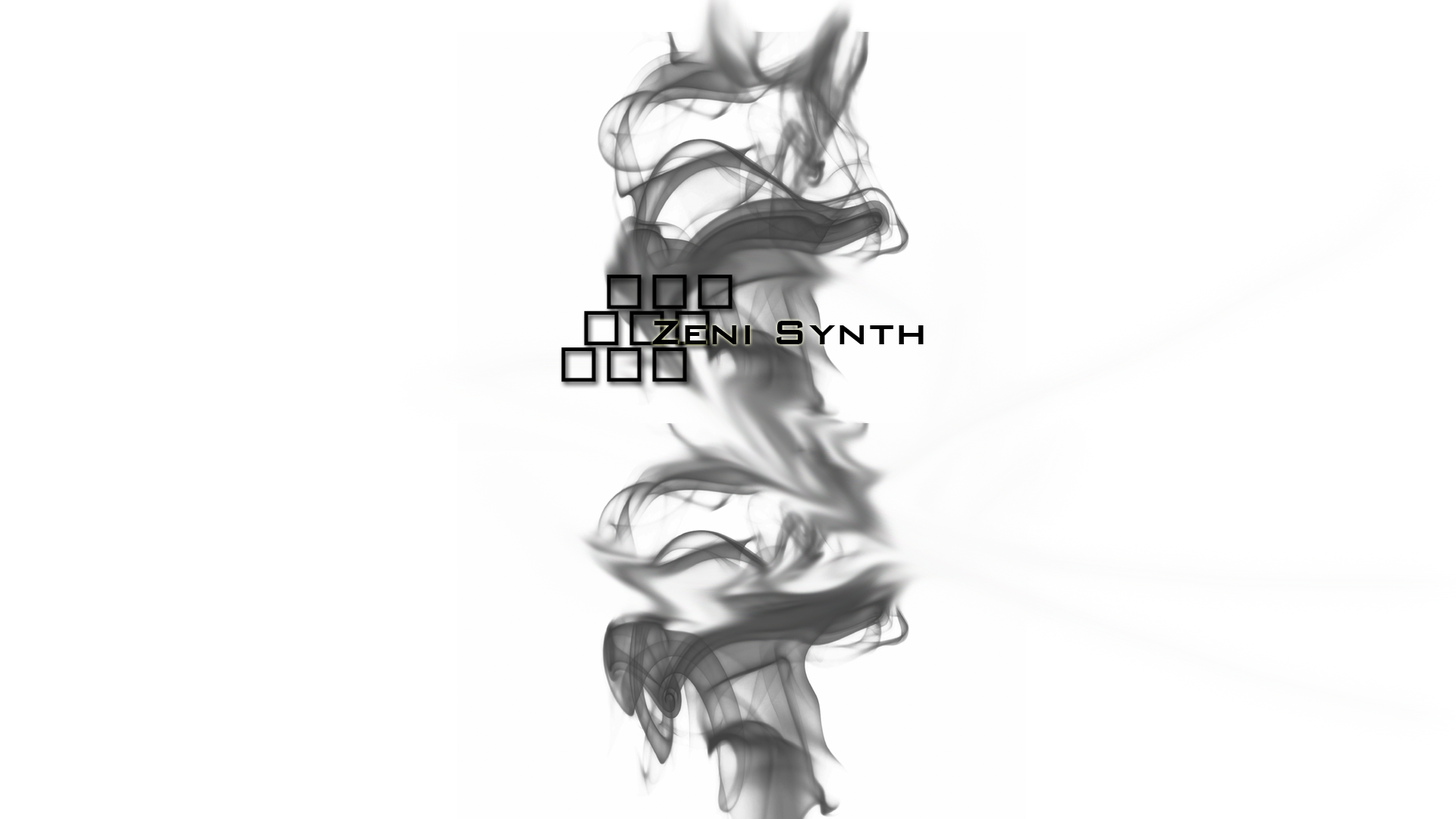
<style>
.page{position:relative;width:1456px;height:819px;background:#ffffff}
.page>*{position:absolute;margin:0}
.t1{font:45.5px/36.4px "MS-Gothic";color:#000000}
.t2{font:45.5px "MS-Gothic";color:#000000}
.t3{font:45.5px "BankGothicBT-Medium";color:#000000}
</style>
<div class="page">
<p class="t1" style="left:561px;top:275px;width:172px;height:107px;text-align:center">□□□<br>　□□□<br><span class="t2">□□□</span></p>
<p class="t3" style="left:652px;top:321px;width:272px;height:23px">Zeni Synth</p>
</div>
